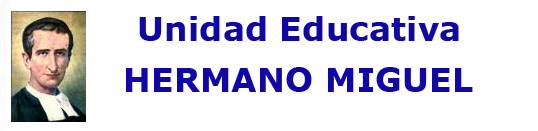
<style>
.page{position:relative;width:538px;height:131px;background:#ffffff}
.page>*{position:absolute;margin:0}
.t1{font:33.3px "Verdana-Bold";color:#1008a6}
.t2{font:33.3px "Verdana-Bold";color:#1008a6;font-variant:small-caps}
</style>
<div class="page">
<p class="t1" style="left:139px;top:16px;width:320px;height:25px">Unidad Educativa</p>
<p class="t2" style="left:126px;top:67px;width:347px;height:25px">HERMANO MIGUEL</p>
</div>
